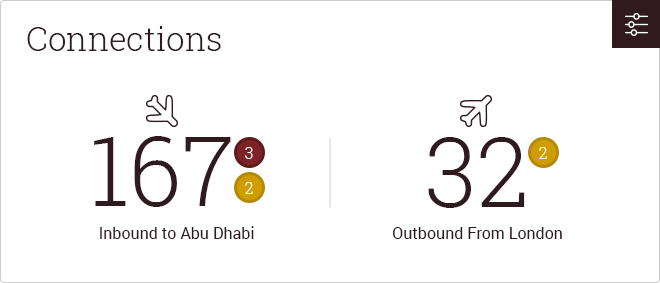
<style>
.page{position:relative;width:660px;height:283px;background:#ffffff}
.page>*{position:absolute;margin:0}
.t1{font:33px "RobotoSlab-Light";color:#2f1b1f}
.t2{font:96px "RobotoSlab-Light";color:#2f1b1f}
.t3{font:16px "RobotoSlab-Light";color:#ffffff}
.t4{font:16px "Roboto-Regular";color:#2f1b1f}
</style>
<div class="page">
<p class="t1" style="left:27px;top:26px;width:194px;height:25px">Connections</p>
<p class="t2" style="left:94px;top:136px;width:137px;height:71px">167</p>
<p class="t2" style="left:428px;top:137px;width:97px;height:71px">32</p>
<p class="t3" style="left:245px;top:147px;width:8px;height:12px">3</p>
<p class="t3" style="left:539px;top:147px;width:8px;height:12px">2</p>
<p class="t3" style="left:245px;top:182px;width:8px;height:12px">2</p>
<p class="t4" style="left:100px;top:226px;width:154px;height:13px">Inbound to Abu Dhabi</p>
<p class="t4" style="left:393px;top:227px;width:169px;height:12px">Outbound From London</p>
</div>
